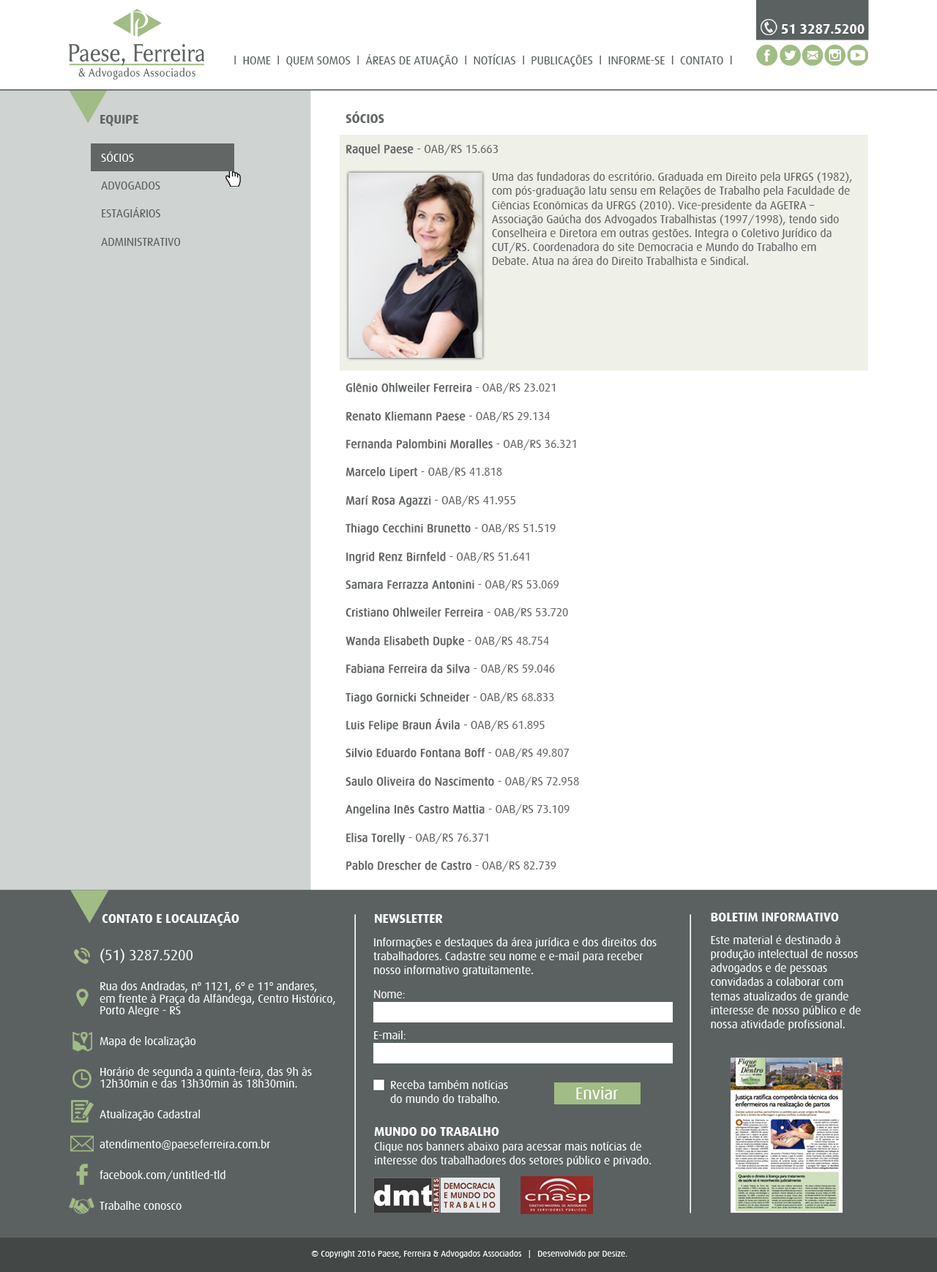
<style>
.page{position:relative;width:937px;height:1272px;background:#ffffff}
.page>*{position:absolute;margin:0}
.t1{font:13.8px "Dax-Bold";letter-spacing:-0.01em;color:#ffffff}
.t2{font:11.7px "Dax-Regular";letter-spacing:-0.01em;color:#5b6161}
.t3{font:10.8px "ArialMT";letter-spacing:-0.01em;color:#000000}
.t4{font:11.7px "Dax-Regular";letter-spacing:-0.01em;color:#626665}
.t5{font:13.2px "Dax-Bold";letter-spacing:-0.01em;color:#626665}
.t6{font:11.7px "Dax-Regular";letter-spacing:-0.01em;color:#626665;font-weight:bold}
.t7{font:11.7px "Dax-Regular";letter-spacing:-0.01em;color:#ffffff}
.t8{font:13.2px "Dax-Bold";letter-spacing:-0.01em;color:#ffffff}
.t9{font:11.7px/12.2px "Dax-Regular";letter-spacing:-0.01em;color:#ffffff}
.t10{font:14.6px/12.2px "Dax-Regular";letter-spacing:-0.01em;color:#ffffff}
.t11{font:17.4px "Dax-Regular";letter-spacing:-0.01em;color:#ffffff}
.t12{font:8.8px "Dax-Regular";letter-spacing:-0.01em;color:#ffffff}
</style>
<div class="page">
<p class="t1" style="left:781px;top:24px;width:84px;height:10px">51 3287.5200</p>
<p class="t2" style="left:234px;top:54px;width:498px;height:13px"><span class="t3"><br></span>l  HOME  l  QUEM SOMOS  l  ÁREAS DE ATUAÇÃO  l  NOTÍCIAS  l  PUBLICAÇÕES  l  INFORME-SE  l  CONTATO  l</p>
<p class="t4" style="left:346px;top:111px;width:506px;height:761px"><span class="t5">SÓCIOS<br><br></span><span class="t6">Raquel Paese </span>- OAB/RS 15.663<br><br>Uma das fundadoras do escritório. Graduada em Direito pela UFRGS (1982), com pós-graduação latu sensu em Relações de Trabalho pela Faculdade de Ciências Econômicas da UFRGS (2010). Vice-presidente da AGETRA – Associação Gaúcha dos Advogados Trabalhistas (1997/1998), tendo sido Conselheira e Diretora em outras gestões. Integra o Coletivo Jurídico da CUT/RS. Coordenadora do site Democracia e Mundo do Trabalho em Debate. Atua na área do Direito Trabalhista e Sindical.<br><br><br><br><br><br><br><br><br><span class="t6">Glênio Ohlweiler Ferreira</span> - OAB/RS 23.021<br><br><span class="t6">Renato Kliemann Paese</span> - OAB/RS 29.134<br><br><span class="t6">Fernanda Palombini Moralles</span> - OAB/RS 36.321<br><br><span class="t6">Marcelo Lipert</span> - OAB/RS 41.818<br><br><span class="t6">Marí Rosa Agazzi</span> - OAB/RS 41.955<br><br><span class="t6">Thiago Cecchini Brunetto </span>- OAB/RS 51.519<br><br><span class="t6">Ingrid Renz Birnfeld </span>- OAB/RS 51.641<br><br><span class="t6">Samara Ferrazza Antonini</span> - OAB/RS 53.069<br><br><span class="t6">Cristiano Ohlweiler Ferreira </span>- OAB/RS 53.720<br><br><span class="t6">Wanda Elisabeth Dupke</span> - OAB/RS 48.754<br><br><span class="t6">Fabiana Ferreira da Silva </span>- OAB/RS 59.046<br><br><span class="t6">Tiago Gornicki Schneider </span>- OAB/RS 68.833<br><br><span class="t6">Luis Felipe Braun Ávila </span>- OAB/RS 61.895<br><br><span class="t6">Silvio Eduardo Fontana Boff</span> - OAB/RS 49.807<br><br><span class="t6">Saulo Oliveira do Nascimento </span>- OAB/RS 72.958<br><br><span class="t6">Angelina Inês Castro Mattia </span>- OAB/RS 73.109<br><br><span class="t6">Elisa Torelly</span> - OAB/RS 76.371<br><br><span class="t6">Pablo Drescher de Castro</span> - OAB/RS 82.739</p>
<p class="t5" style="left:100px;top:115px;width:38px;height:12px">EQUIPE</p>
<p class="t2" style="left:101px;top:152px;width:80px;height:94px"><span class="t7">SÓCIOS<br></span><br>ADVOGADOS<br><br>ESTAGIÁRIOS<br><br>ADMINISTRATIVO</p>
<p class="t8" style="left:102px;top:912px;width:137px;height:14px">CONTATO E LOCALIZAÇÃO</p>
<p class="t8" style="left:375px;top:914px;width:68px;height:9px">NEWSLETTER</p>
<p class="t7" style="left:711px;top:913px;width:150px;height:118px"><span class="t8">BOLETIM INFORMATIVO<br><br></span>Este material é destinado à produção intelectual de nossos advogados e de pessoas convidadas a colaborar com temas atualizados de grande interesse de nosso público e de nossa atividade profissional.</p>
<p class="t7" style="left:373px;top:938px;width:284px;height:39px">Informações e destaques da área jurídica e dos direitos dos trabalhadores. Cadastre seu nome e e-mail para receber nosso informativo gratuitamente.</p>
<p class="t9" style="left:100px;top:949px;width:235px;height:261px"><span class="t10">(51) 3287.5200<br><br></span>Rua dos Andradas, nº 1121, 6º e 11º andares, <br>em frente à Praça da Alfândega, Centro Histórico, Porto Alegre - RS<br><br>Mapa de localização<br><br>Horário de segunda a quinta-feira, das 9h às 12h30min e das 13h30min às 18h30min.<br><br>Atualização Cadastral<br><br>atendimento@paeseferreira.com.br<br><br>facebook.com/untitled-tld<br><br>Trabalhe conosco</p>
<p class="t7" style="left:374px;top:991px;width:31px;height:8px">Nome:</p>
<p class="t7" style="left:374px;top:1031px;width:32px;height:9px">E-mail:</p>
<p class="t7" style="left:390px;top:1081px;width:118px;height:22px">Receba também notícias<br>do mundo do trabalho.</p>
<p class="t11" style="left:576px;top:1087px;width:43px;height:13px">Enviar</p>
<p class="t7" style="left:374px;top:1127px;width:278px;height:40px"><span class="t8">MUNDO DO TRABALHO <br></span>Clique nos banners abaixo para acessar mais notícias de <br>interesse dos trabalhadores dos setores público e privado.</p>
<p class="t12" style="left:311px;top:1250px;width:316px;height:9px">© Copyright 2016 Paese, Ferreira &amp; Advogados Associados   |   Desenvolvido por Desize.</p>
</div>
